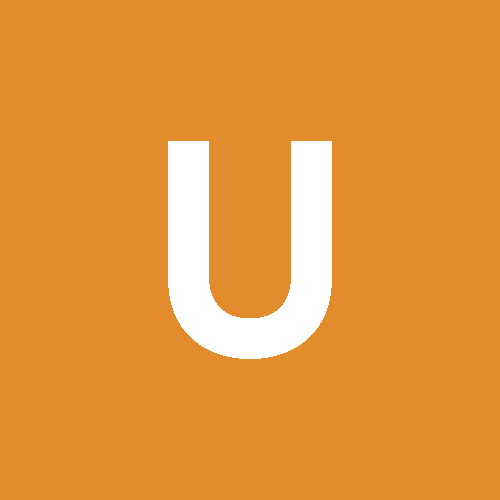
<style>
.page{position:relative;width:500px;height:500px;background:#e38c2d}
.page>*{position:absolute;margin:0}
.t1{font:300px "CircularStd-Bold";color:#ffffff}
</style>
<div class="page">
<p class="t1" style="left:168px;top:141px;width:164px;height:218px">U</p>
</div>
